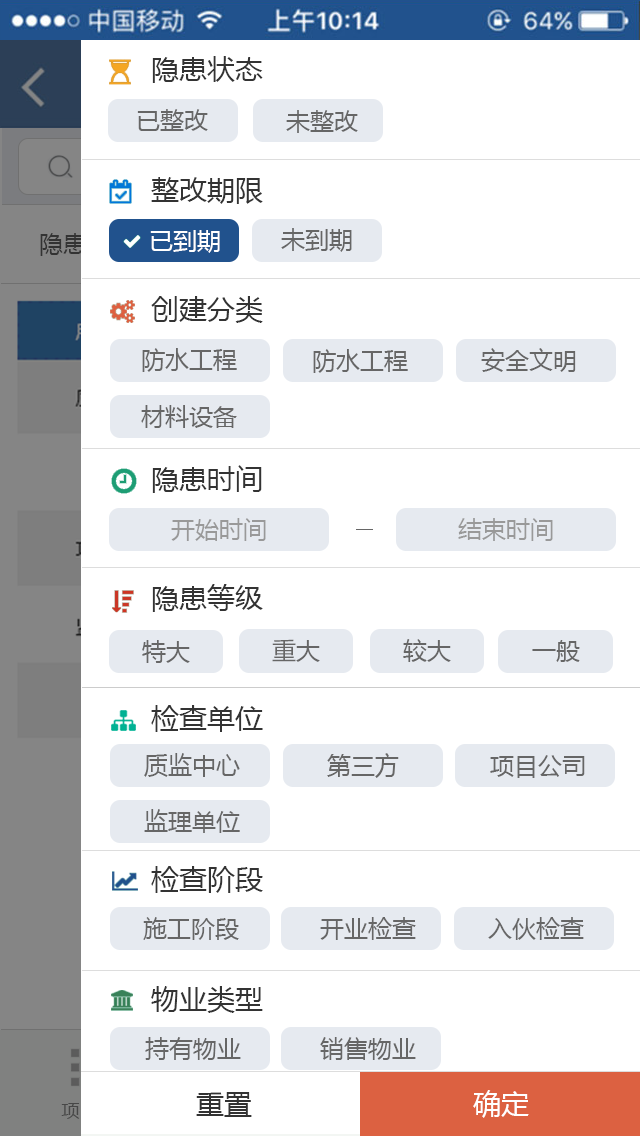
<style>
.page{position:relative;width:640px;height:1136px;background:#ffffff}
.page>*{position:absolute;margin:0}
.t1{font:28px "MicrosoftYaHei";color:#333333}
.t2{font:24px "MicrosoftYaHei";color:#666666}
.t3{font:24px "MicrosoftYaHei";color:#ffffff}
.t4{font:24px "MicrosoftYaHei";color:#999999}
.t5{font:28px "MicrosoftYaHei";color:#ffffff}
</style>
<div class="page">
<p class="t1" style="left:152px;top:56px;width:111px;height:27px">隐患状态</p>
<p class="t2" style="left:137px;top:109px;width:71px;height:22px">已整改</p>
<p class="t2" style="left:286px;top:110px;width:72px;height:23px">未整改</p>
<p class="t1" style="left:151px;top:177px;width:112px;height:27px">整改期限</p>
<p class="t3" style="left:150px;top:230px;width:70px;height:23px">已到期</p>
<p class="t2" style="left:281px;top:228px;width:71px;height:24px">未到期</p>
<p class="t1" style="left:151px;top:296px;width:112px;height:27px">创建分类</p>
<p class="t2" style="left:142px;top:348px;width:95px;height:24px">防水工程</p>
<p class="t2" style="left:313px;top:349px;width:95px;height:24px">防水工程</p>
<p class="t2" style="left:481px;top:348px;width:95px;height:24px">安全文明</p>
<p class="t2" style="left:141px;top:405px;width:96px;height:23px">材料设备</p>
<p class="t1" style="left:152px;top:465px;width:110px;height:28px">隐患时间</p>
<p class="t4" style="left:171px;top:518px;width:95px;height:23px">开始时间</p>
<p class="t4" style="left:458px;top:518px;width:95px;height:23px">结束时间</p>
<p class="t1" style="left:152px;top:584px;width:111px;height:28px">隐患等级</p>
<p class="t2" style="left:142px;top:640px;width:48px;height:23px">特大</p>
<p class="t2" style="left:272px;top:639px;width:48px;height:23px">重大</p>
<p class="t2" style="left:403px;top:639px;width:48px;height:23px">较大</p>
<p class="t2" style="left:532px;top:640px;width:48px;height:22px">一般</p>
<p class="t1" style="left:151px;top:705px;width:112px;height:27px">检查单位</p>
<p class="t2" style="left:144px;top:753px;width:96px;height:24px">质监中心</p>
<p class="t2" style="left:327px;top:753px;width:72px;height:25px">第三方</p>
<p class="t2" style="left:490px;top:755px;width:95px;height:23px">项目公司</p>
<p class="t2" style="left:144px;top:809px;width:96px;height:24px">监理单位</p>
<p class="t1" style="left:151px;top:866px;width:112px;height:27px">检查阶段</p>
<p class="t2" style="left:143px;top:917px;width:96px;height:23px">施工阶段</p>
<p class="t2" style="left:320px;top:917px;width:96px;height:23px">开业检查</p>
<p class="t2" style="left:488px;top:917px;width:96px;height:23px">入伙检查</p>
<p class="t1" style="left:151px;top:986px;width:112px;height:27px">物业类型</p>
<p class="t2" style="left:145px;top:1037px;width:96px;height:23px">持有物业</p>
<p class="t2" style="left:320px;top:1037px;width:96px;height:23px">销售物业</p>
<p class="t1" style="left:196px;top:1092px;width:56px;height:25px">重置</p>
<p class="t5" style="left:473px;top:1090px;width:56px;height:28px">确定</p>
</div>
